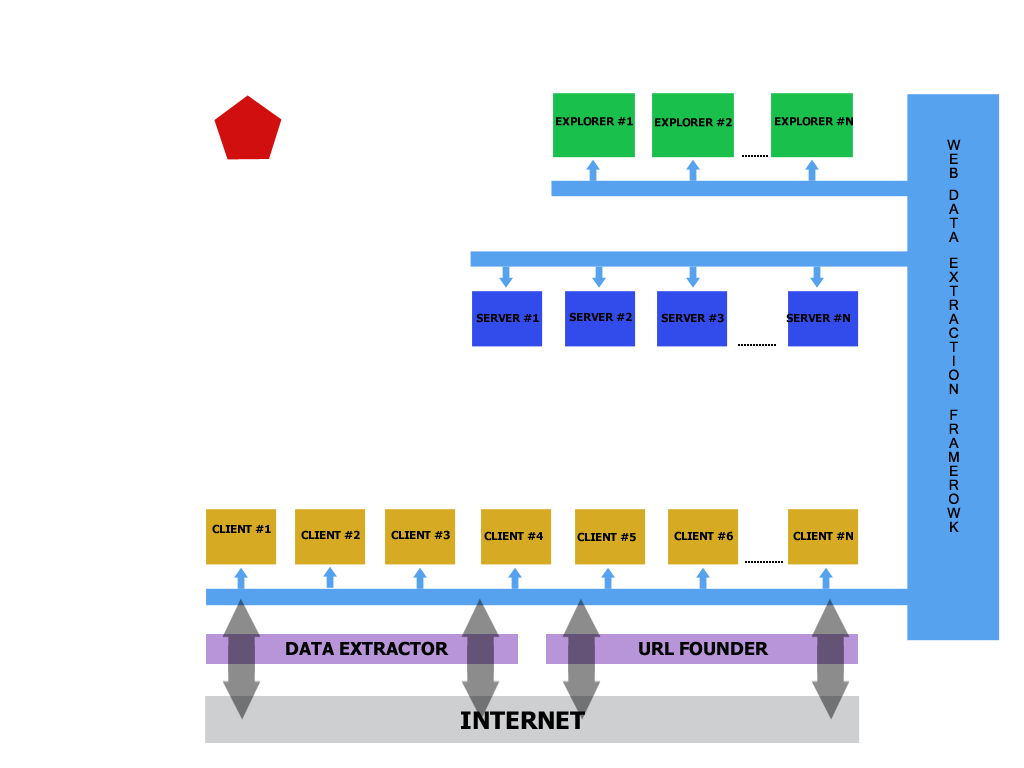
<style>
.page{position:relative;width:1024px;height:768px;background:#ffffff}
.page>*{position:absolute;margin:0}
.t1{font:11px "Tahoma-Bold";color:#000000}
.t2{font:14px/12px "MicrosoftSansSerif";color:#000000}
.t3{font:18px "Tahoma-Bold";color:#000000}
.t4{font:24px "Tahoma-Bold";color:#000000}
</style>
<div class="page">
<p class="t1" style="left:556px;top:117px;width:77px;height:9px">EXPLORER #1</p>
<p class="t1" style="left:655px;top:118px;width:77px;height:9px">EXPLORER #2</p>
<p class="t1" style="left:775px;top:117px;width:78px;height:9px">EXPLORER #N</p>
<p class="t2" style="left:947px;top:139px;width:14px;height:393px;text-align:right">WEB  DATA   EXTRACTION   FRAMEROWK</p>
<p class="t1" style="left:742px;top:155px;width:26px;height:2px">.........</p>
<p class="t1" style="left:476px;top:313px;width:63px;height:10px">SERVER #1</p>
<p class="t1" style="left:569px;top:312px;width:63px;height:10px">SERVER #2</p>
<p class="t1" style="left:661px;top:313px;width:63px;height:10px">SERVER #3</p>
<p class="t1" style="left:786px;top:313px;width:64px;height:10px">SERVER #N</p>
<p class="t1" style="left:738px;top:344px;width:38px;height:2px">.............</p>
<p class="t1" style="left:212px;top:524px;width:59px;height:10px">CLIENT #1</p>
<p class="t1" style="left:301px;top:530px;width:59px;height:10px">CLIENT #2</p>
<p class="t1" style="left:391px;top:530px;width:59px;height:10px">CLIENT #3</p>
<p class="t1" style="left:484px;top:531px;width:59px;height:10px">CLIENT #4</p>
<p class="t1" style="left:577px;top:532px;width:59px;height:10px">CLIENT #5</p>
<p class="t1" style="left:674px;top:531px;width:59px;height:10px">CLIENT #6</p>
<p class="t1" style="left:793px;top:531px;width:60px;height:10px">CLIENT #N</p>
<p class="t1" style="left:745px;top:561px;width:38px;height:2px">.............</p>
<p class="t3" style="left:286px;top:641px;width:163px;height:15px">DATA EXTRACTOR</p>
<p class="t3" style="left:639px;top:641px;width:130px;height:15px">URL FOUNDER</p>
<p class="t4" style="left:461px;top:711px;width:124px;height:18px">INTERNET</p>
</div>
